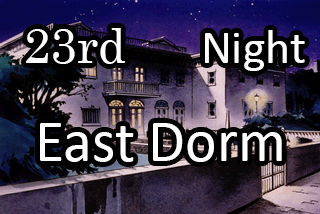
<style>
.page{position:relative;width:320px;height:214px}
.page>*{position:absolute;margin:0}
.t1{font:48px "Century";color:#ffffff}
.t2{font:48px "Calibri";color:#ffffff}
.t3{font:60px "Calibri";color:#ffffff}
</style>
<div class="page">
<p class="t1" style="left:26px;top:28px;width:99px;height:36px">23rd</p>
<p class="t2" style="left:205px;top:30px;width:100px;height:41px">Night</p>
<p class="t3" style="left:40px;top:123px;width:242px;height:39px">East Dorm</p>
</div>
